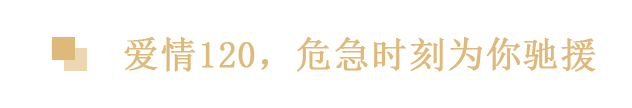
<style>
.page{position:relative;width:632px;height:108px;background:#ffffff}
.page>*{position:absolute;margin:0}
.t1{font:36px "NSimSun";letter-spacing:0.025em;color:#dfb979;font-weight:bold}
</style>
<div class="page">
<p class="t1" style="left:124px;top:37px;width:472px;height:35px">爱情120，危急时刻为你驰援</p>
</div>
